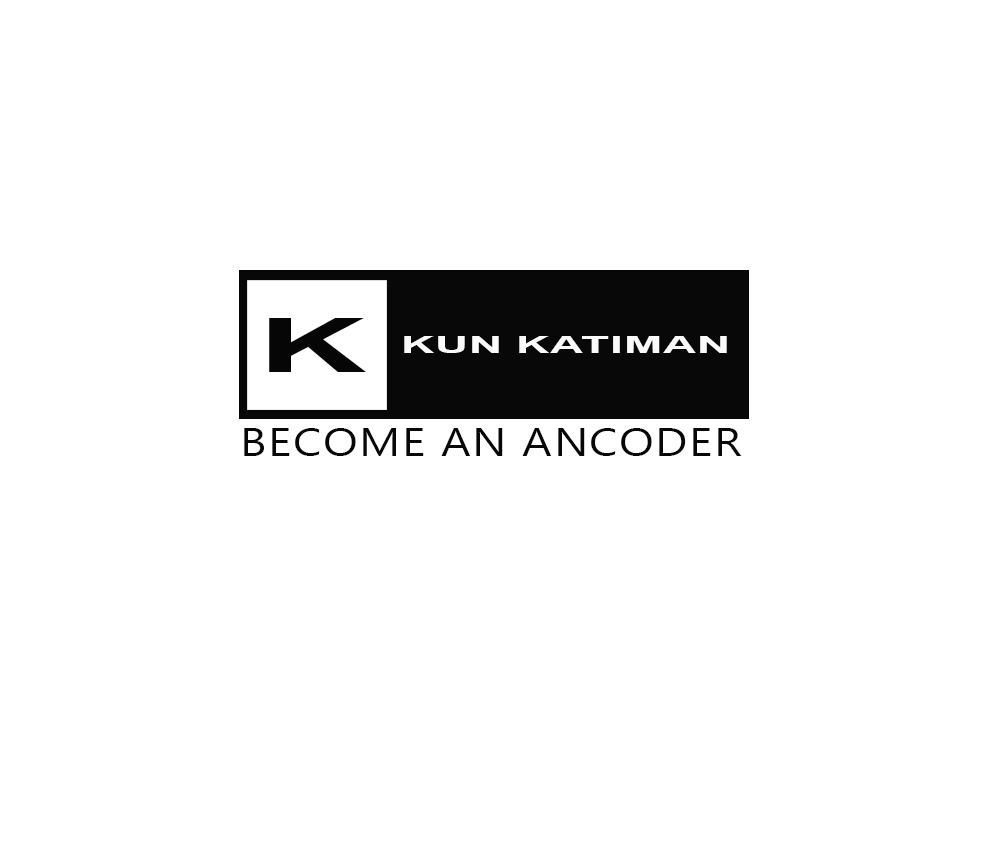
<style>
.page{position:relative;width:1000px;height:846px;background:#ffffff}
.page>*{position:absolute;margin:0}
.t1{font:75px "Arial-BoldMT";letter-spacing:0.02em;color:#060606;scale:2 1}
.t2{font:22.9px "Arial-BoldMT";letter-spacing:0.02em;color:#fafafa;scale:2 1}
.t3{font:39px "SegoeUISymbol";letter-spacing:0.037em;color:#070707;scale:1.18 1}
</style>
<div class="page">
<p class="t1" style="left:269px;top:318px;width:97px;height:54px">K</p>
<p class="t2" style="left:404px;top:336px;width:323px;height:17px">KUN KATIMAN</p>
<p class="t3" style="left:244px;top:428px;width:498px;height:28px">BECOME AN ANCODER</p>
</div>
